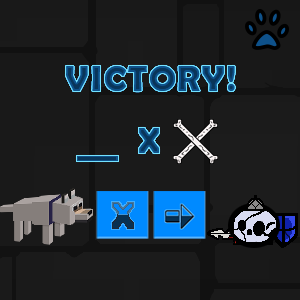
<style>
.page{position:relative;width:300px;height:300px;background:#191919}
.page>*{position:absolute;margin:0}
.t1{font:36px "BerlinSansFBDemi-Bold";letter-spacing:0.05em;text-transform:uppercase}
</style>
<div class="page">
<p class="t1" style="left:66px;top:66px;width:169px;height:26px">VICTORY!</p>
<p class="t1" style="left:66px;top:66px;width:169px;height:26px">VICTORY!</p>
<p class="t1" style="left:139px;top:128px;width:20px;height:25px">X</p>
<p class="t1" style="left:139px;top:128px;width:20px;height:25px">X</p>
</div>
